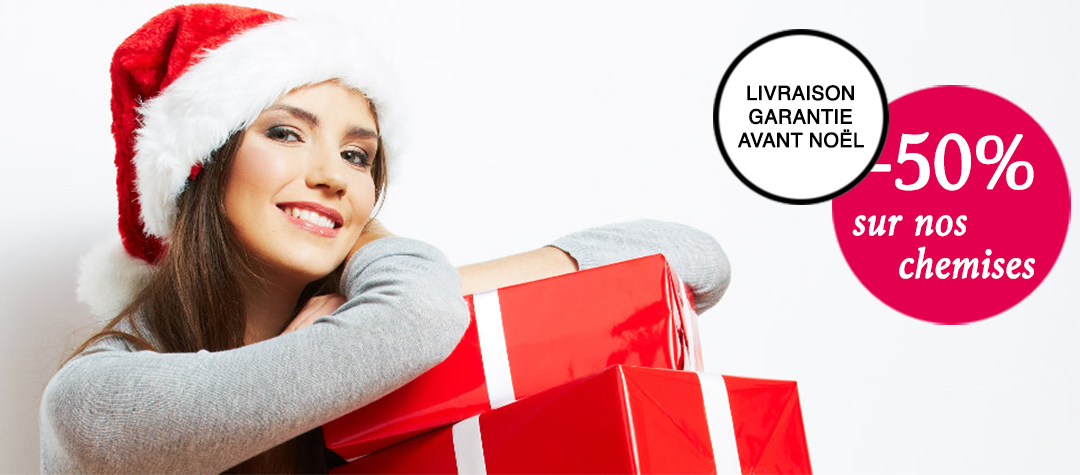
<style>
.page{position:relative;width:1080px;height:475px}
.page>*{position:absolute;margin:0}
.t1{font:19.6px "Helvetica";color:#000000;font-weight:bold}
.t2{font:79.6px "Marion-Regular";color:#ffffff;font-weight:bold}
.t3{font:44.1px "Marion-Italic";color:#ffffff;font-weight:bold}
</style>
<div class="page">
<p class="t1" style="left:738px;top:85px;width:126px;height:63px;text-align:center">LIVRAISON<br>GARANTIE<br>AVANT NOËL</p>
<p class="t2" style="left:869px;top:132px;width:165px;height:59px">-50%</p>
<p class="t3" style="left:852px;top:215px;width:115px;height:22px">sur nos</p>
<p class="t3" style="left:899px;top:246px;width:136px;height:33px">chemises</p>
</div>
